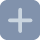
<style>
.page{position:relative;width:40px;height:40px;background:#8192ac}
.page>*{position:absolute;margin:0}
.t1{font:48px "Courier";color:#cad5df}
</style>
<div class="page">
<p class="t1" style="left:8px;top:7px;width:25px;height:26px">+</p>
</div>
